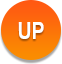
<style>
.page{position:relative;width:62px;height:64px;background:#ffffff}
.page>*{position:absolute;margin:0}
.t1{font:24px "ArialNarrow-Bold";color:#ffffff}
</style>
<div class="page">
<p class="t1" style="left:18px;top:22px;width:26px;height:17px">UP</p>
</div>
